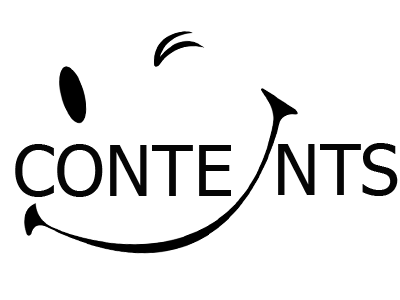
<style>
.page{position:relative;width:400px;height:300px;background:#ffffff}
.page>*{position:absolute;margin:0}
.t1{font:70px "Tahoma";letter-spacing:0.005em;color:#050505}
</style>
<div class="page">
<p class="t1" style="left:15px;top:144px;width:216px;height:53px">CONTE</p>
<p class="t1" style="left:278px;top:143px;width:120px;height:53px">NTS</p>
</div>
